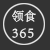
<style>
.page{position:relative;width:50px;height:50px;background:#333333}
.page>*{position:absolute;margin:0}
.t1{font:12px "AdobeSongStd-Light";color:#e7e7e7;font-weight:bold}
.t2{font:14.4px "AdobeSongStd-Light";letter-spacing:0.05em;color:#e7e7e7;font-weight:bold}
</style>
<div class="page">
<p class="t1" style="left:12px;top:10px;width:24px;height:12px">领食</p>
<p class="t2" style="left:12px;top:28px;width:22px;height:10px">365</p>
</div>
